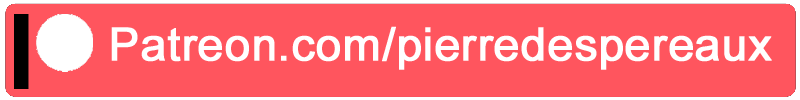
<style>
.page{position:relative;width:800px;height:100px;background:#ff555e}
.page>*{position:absolute;margin:0}
.t1{font:45.8px "ArialMT";color:#ffffff;font-weight:bold}
</style>
<div class="page">
<p class="t1" style="left:111px;top:26px;width:661px;height:44px">Patreon.com/pierredespereaux</p>
</div>
